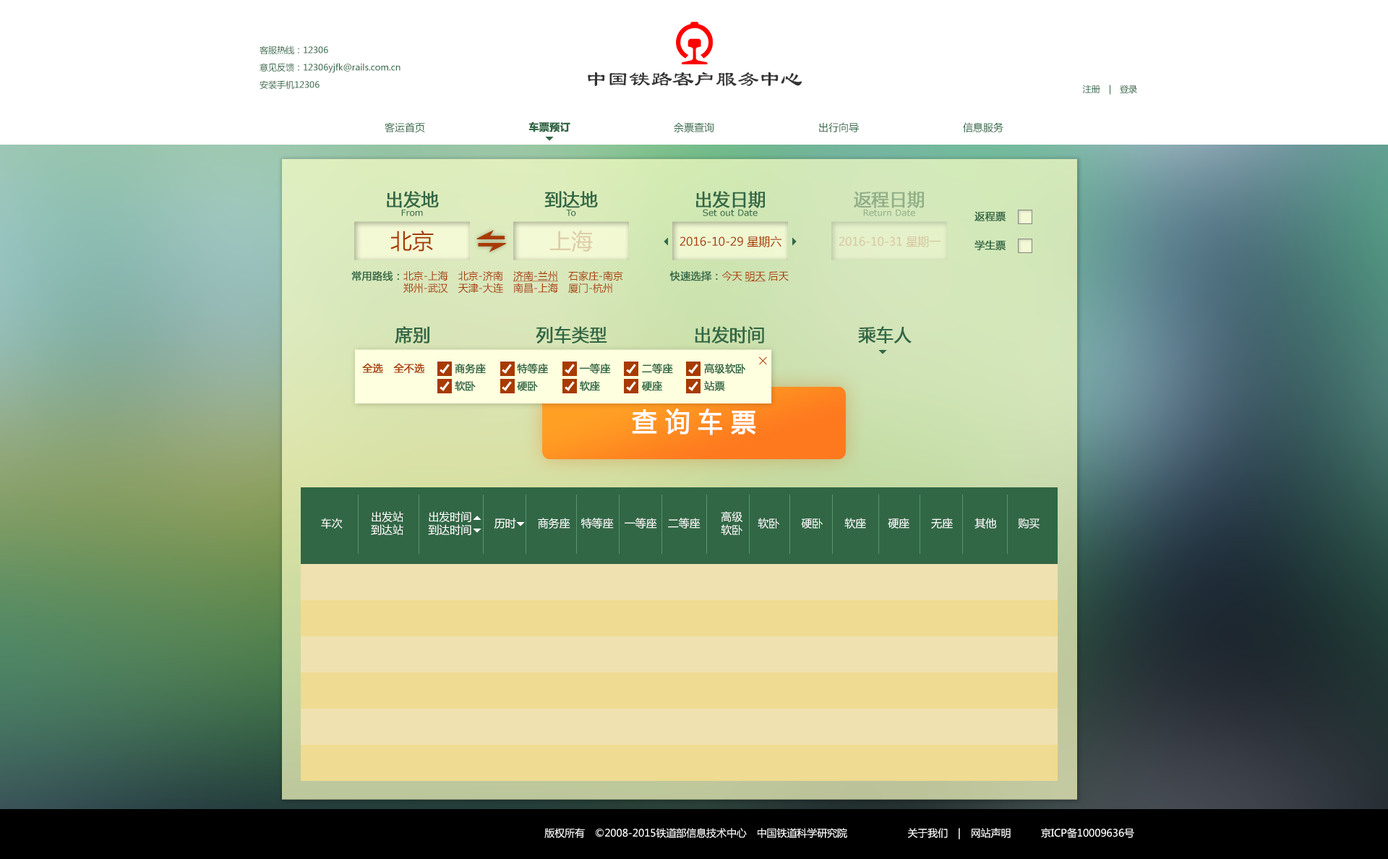
<style>
.page{position:relative;width:1388px;height:859px}
.page>*{position:absolute;margin:0}
.t1{font:8.7px/17.4px "MicrosoftYaHei";color:#316745}
.t2{font:21.7px "LiSu";color:#333333}
.t3{font:8.7px "MicrosoftYaHei";color:#316745}
.t4{font:10.1px "MicrosoftYaHei";color:#316745}
.t5{font:10.1px "MicrosoftYaHei-Bold";color:#316745;font-weight:bold}
.t6{font:8.7px "Verdana";color:#316745}
.t7{font:17.4px "MicrosoftYaHei";color:#316745;font-weight:bold}
.t8{font:8.7px "Verdana";color:#91af88}
.t9{font:17.4px "MicrosoftYaHei";color:#91af88;font-weight:bold}
.t10{font:10.1px "MicrosoftYaHei";color:#316745;font-weight:bold}
.t11{font:21.7px "MicrosoftYaHei";color:#a83a00}
.t12{font:21.7px "MicrosoftYaHei";color:#decca8}
.t13{font:11.6px "MicrosoftYaHei";color:#a83a00}
.t14{font:11.6px "MicrosoftYaHei";color:#d8c5a0}
.t15{font:10.1px "MicrosoftYaHei";color:#a83a00}
.t16{font:10.1px "MicrosoftYaHei";color:#a83a00;text-decoration:underline}
.t17{font:10.1px "MicrosoftYaHei";color:#a83a00;font-weight:bold}
.t18{font:10.1px/17.4px "MicrosoftYaHei";color:#316745;font-weight:bold}
.t19{font:26px "MicrosoftYaHei";color:#ffffff;font-weight:bold;scale:0.94 1}
.t20{font:10.8px "MicrosoftYaHei";color:#ffffff}
.t21{font:10.1px "MicrosoftYaHei";color:#ffffff}
</style>
<div class="page">
<p class="t1" style="left:260px;top:46px;width:141px;height:44px">客服热线：12306<br>意见反馈：12306yjfk@rails.com.cn<br>安装手机12306</p>
<p class="t2" style="left:588px;top:72px;width:215px;height:14px">中国铁路客户服务中心</p>
<p class="t3" style="left:1082px;top:85px;width:55px;height:10px">注册　|　登录</p>
<p class="t4" style="left:385px;top:122px;width:40px;height:11px">客运首页</p>
<p class="t5" style="left:529px;top:121px;width:41px;height:11px">车票预订</p>
<p class="t4" style="left:674px;top:122px;width:40px;height:10px">余票查询</p>
<p class="t4" style="left:819px;top:122px;width:40px;height:10px">出行向导</p>
<p class="t4" style="left:963px;top:122px;width:41px;height:10px">信息服务</p>
<p class="t6" style="left:387px;top:191px;width:52px;height:25px;text-align:center"><span class="t7">出发地<br></span>From</p>
<p class="t7" style="left:544px;top:191px;width:54px;height:25px;text-align:center">到达地<br><span class="t6">To</span></p>
<p class="t6" style="left:696px;top:191px;width:69px;height:25px;text-align:center"><span class="t7">出发日期<br></span>Set out Date</p>
<p class="t8" style="left:854px;top:191px;width:70px;height:25px;text-align:center"><span class="t9">返程日期<br></span>Return Date</p>
<p class="t10" style="left:975px;top:211px;width:31px;height:11px">返程票</p>
<p class="t11" style="left:390px;top:230px;width:44px;height:22px">北京</p>
<p class="t12" style="left:550px;top:231px;width:43px;height:21px">上海</p>
<p class="t13" style="left:680px;top:236px;width:102px;height:12px">2016-10-29 星期六</p>
<p class="t14" style="left:839px;top:236px;width:102px;height:12px">2016-10-31 星期一</p>
<p class="t10" style="left:975px;top:240px;width:31px;height:10px">学生票</p>
<p class="t15" style="left:351px;top:270px;width:272px;height:24px"><span class="t10">常用路线：</span>北京-上海　北京-济南　<span class="t16">济南-兰州</span>　石家庄-南京<br>　　　　　郑州-武汉　天津-大连　南昌-上海　厦门-杭州</p>
<p class="t10" style="left:670px;top:270px;width:119px;height:12px">快速选择：<span class="t15">今天 </span><span class="t16">明天</span><span class="t15"> 后天</span></p>
<p class="t7" style="left:395px;top:326px;width:34px;height:17px">席别</p>
<p class="t7" style="left:536px;top:326px;width:71px;height:17px">列车类型</p>
<p class="t7" style="left:695px;top:326px;width:69px;height:17px">出发时间</p>
<p class="t7" style="left:858px;top:326px;width:54px;height:17px">乘车人</p>
<p class="t17" style="left:362px;top:363px;width:63px;height:11px">全选　全不选</p>
<p class="t18" style="left:455px;top:363px;width:291px;height:28px">商务座　　　特等座　　　一等座　　　二等座　　　高级软卧<br>软卧　　　　硬卧　　　　软座　　　　硬座　　　　站票</p>
<p class="t19" style="left:632px;top:409px;width:124px;height:26px">查 询 车 票</p>
<p class="t20" style="left:321px;top:518px;width:719px;height:11px">车次　　　　　　　　　　　　　　历时　　商务座　特等座　一等座　二等座 　　　　　软卧　　硬卧　　软座　　硬座　　无座　　其他　　购买</p>
<p class="t20" style="left:371px;top:511px;width:372px;height:24px">出发站　　 出发时间　　　　　　　　　　　　　　　　　　　　　　　高级<br>到达站　　 到达时间　　　　　　　　　　　　　　　　　　　　　　　软卧</p>
<p class="t21" style="left:544px;top:828px;width:590px;height:11px">版权所有　©2008-2015铁道部信息技术中心　中国铁道科学研究院　　　　　　关于我们　|　网站声明　　　京ICP备10009636号</p>
</div>
